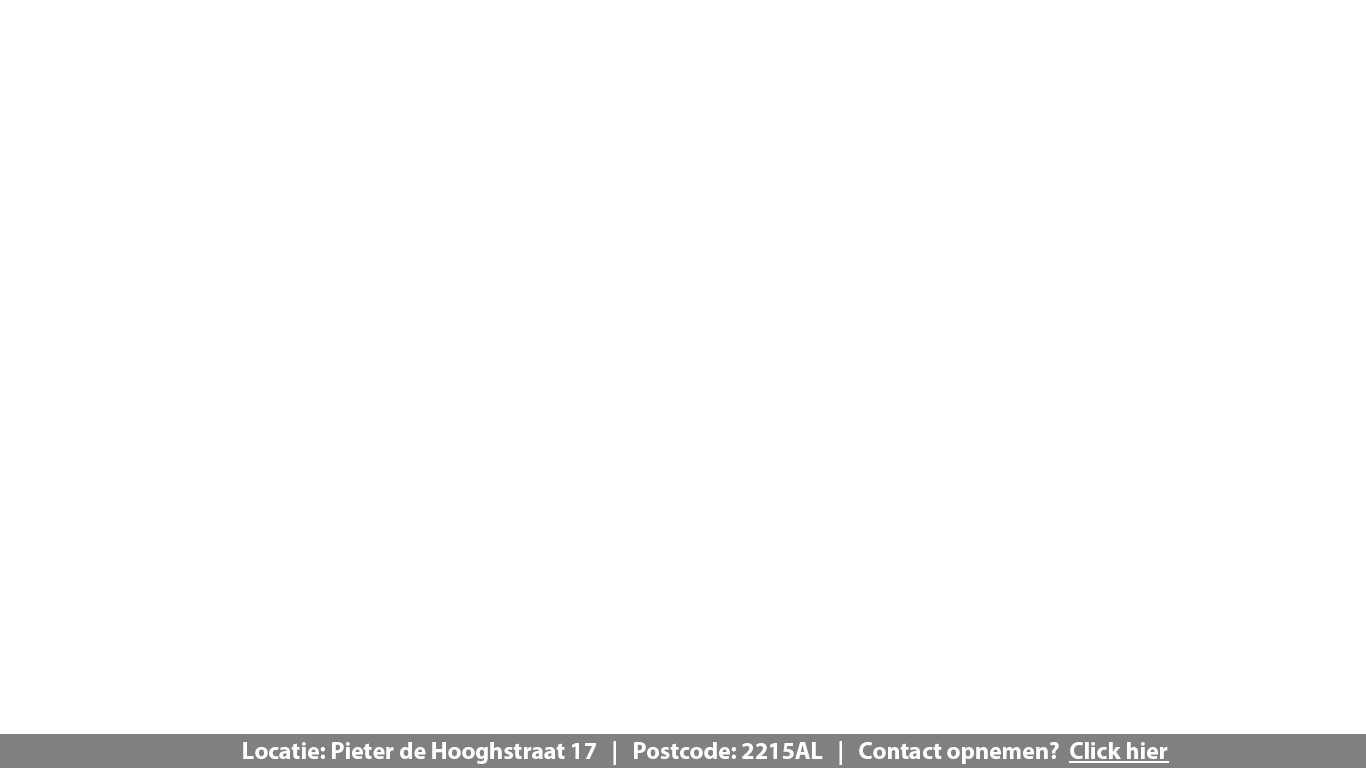
<style>
.page{position:relative;width:1366px;height:768px;background:#ffffff}
.page>*{position:absolute;margin:0}
.t1{font:24px "MyriadPro-Bold";color:#ffffff}
</style>
<div class="page">
<p class="t1" style="left:243px;top:741px;width:925px;height:24px">Locatie: Pieter de Hooghstraat 17   |   Postcode: 2215AL   |   Contact opnemen?  Click hier</p>
</div>
